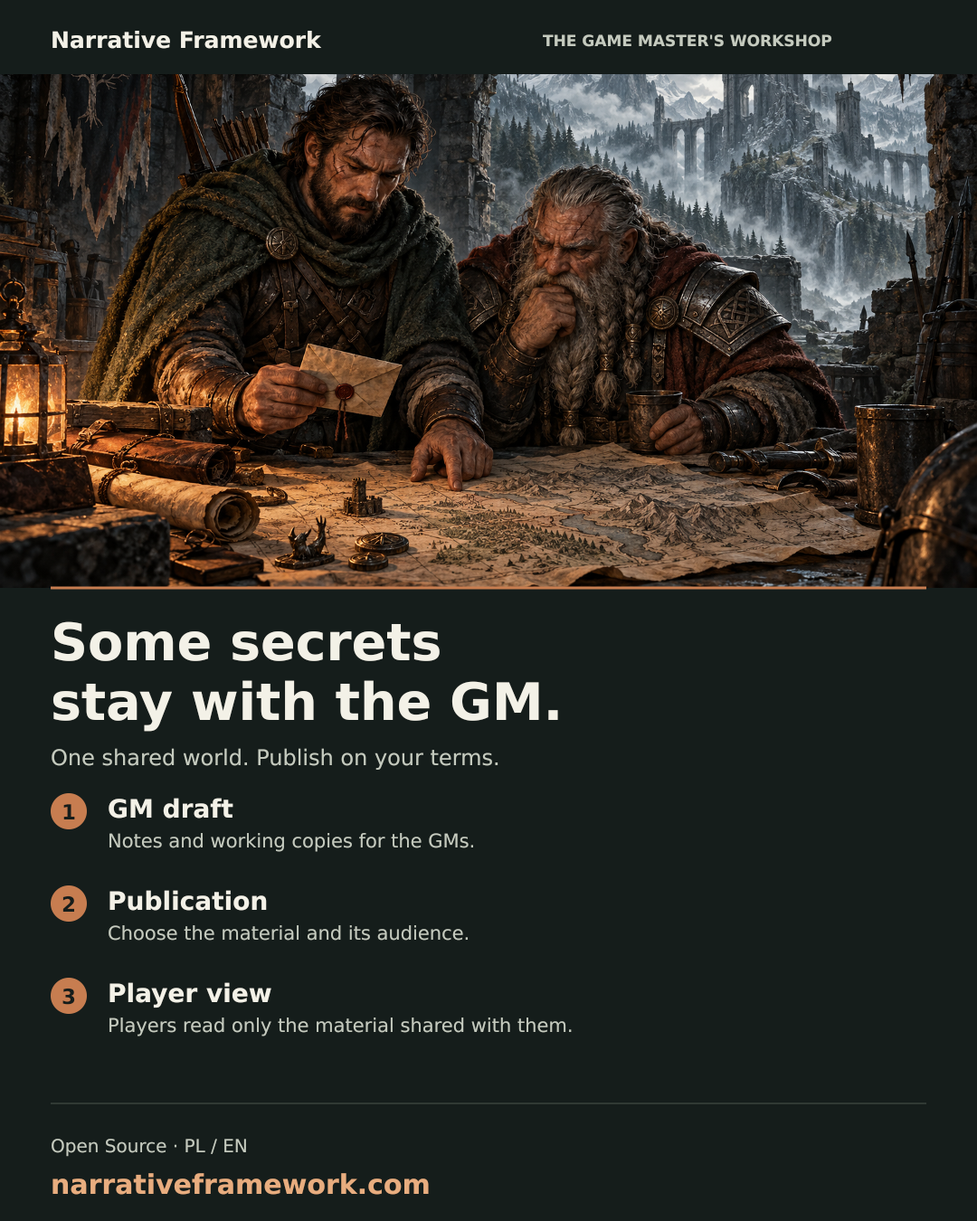
<style>
.page{position:relative;width:977px;height:1221px;background:#151d1b}
.page>*{position:absolute;margin:0}
.t1{font:22.6px "DejaVuSans-Bold";color:#f3f1e7}
.t2{font:15.4px "DejaVuSans-Bold";color:#c5cbbf}
.t3{font:51.5px "DejaVuSans-Bold";color:#f3f1e7}
.t4{font:21.7px "DejaVuSans-Regular";color:#c5cbbf}
.t5{font:25.3px "DejaVuSans-Bold";color:#f3f1e7}
.t6{font:20.8px "DejaVuSans-Bold";color:#151d1b}
.t7{font:19px "DejaVuSans-Regular";color:#c5cbbf}
.t8{font:18.1px "DejaVuSans-Regular";color:#c5cbbf}
.t9{font:27.1px "DejaVuSans-Bold";color:#e8ad7f}
</style>
<div class="page">
<p class="t1" style="left:52px;top:31px;width:271px;height:19px">Narrative Framework</p>
<p class="t2" style="left:542px;top:34px;width:291px;height:14px">THE GAME MASTER'S WORKSHOP</p>
<p class="t3" style="left:53px;top:621px;width:387px;height:41px">Some secrets</p>
<p class="t3" style="left:52px;top:680px;width:507px;height:53px">stay with the GM.</p>
<p class="t4" style="left:51px;top:748px;width:448px;height:23px">One shared world. Publish on your terms.</p>
<p class="t5" style="left:108px;top:798px;width:126px;height:21px">GM draft</p>
<p class="t6" style="left:63px;top:804px;width:12px;height:15px">1</p>
<p class="t7" style="left:109px;top:833px;width:366px;height:20px">Notes and working copies for the GMs.</p>
<p class="t5" style="left:109px;top:890px;width:159px;height:22px">Publication</p>
<p class="t6" style="left:61px;top:895px;width:14px;height:17px">2</p>
<p class="t7" style="left:108px;top:925px;width:360px;height:16px">Choose the material and its audience.</p>
<p class="t6" style="left:61px;top:988px;width:15px;height:18px">3</p>
<p class="t5" style="left:109px;top:982px;width:163px;height:27px">Player view</p>
<p class="t7" style="left:109px;top:1017px;width:463px;height:20px">Players read only the material shared with them.</p>
<p class="t8" style="left:51px;top:1139px;width:196px;height:19px">Open Source · PL / EN</p>
<p class="t9" style="left:52px;top:1173px;width:378px;height:23px">narrativeframework.com</p>
</div>
